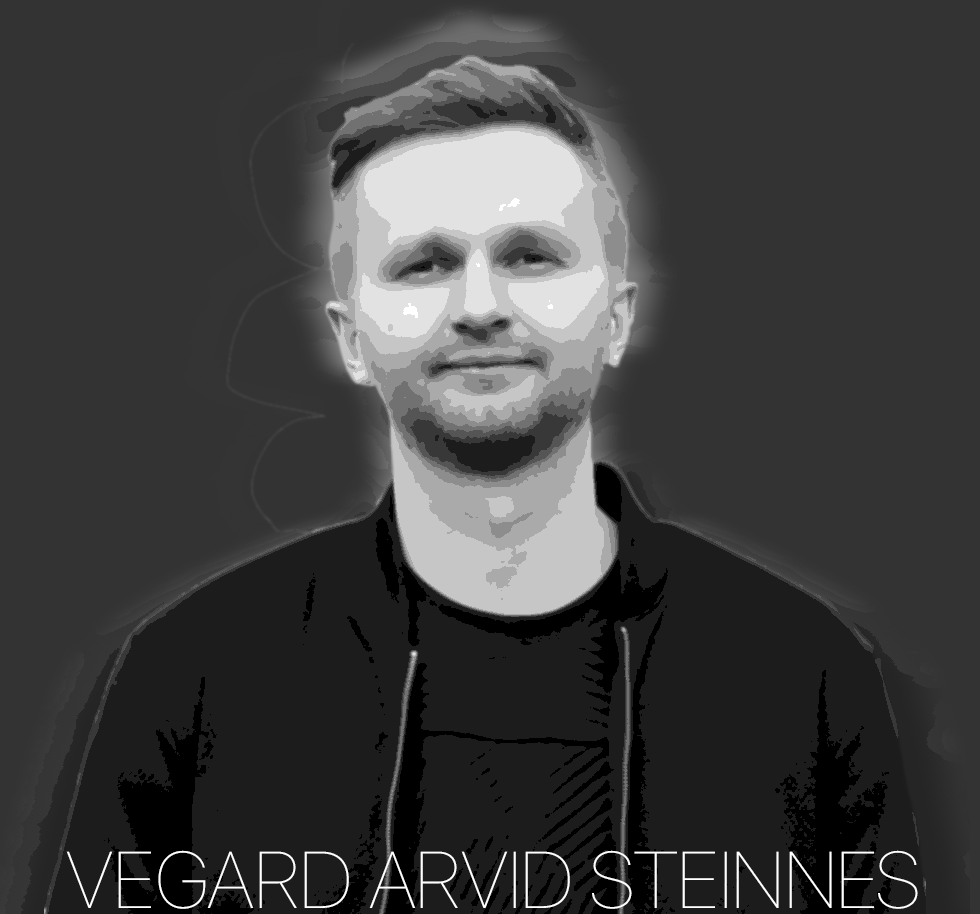
<style>
.page{position:relative;width:980px;height:914px;background:#333333}
.page>*{position:absolute;margin:0}
.t1{font:80px "SFProDisplay-Ultralight";letter-spacing:0.01em;color:#ffffff}
</style>
<div class="page">
<p class="t1" style="left:66px;top:850px;width:852px;height:59px">VEGARD ARVID STEINNES</p>
</div>
